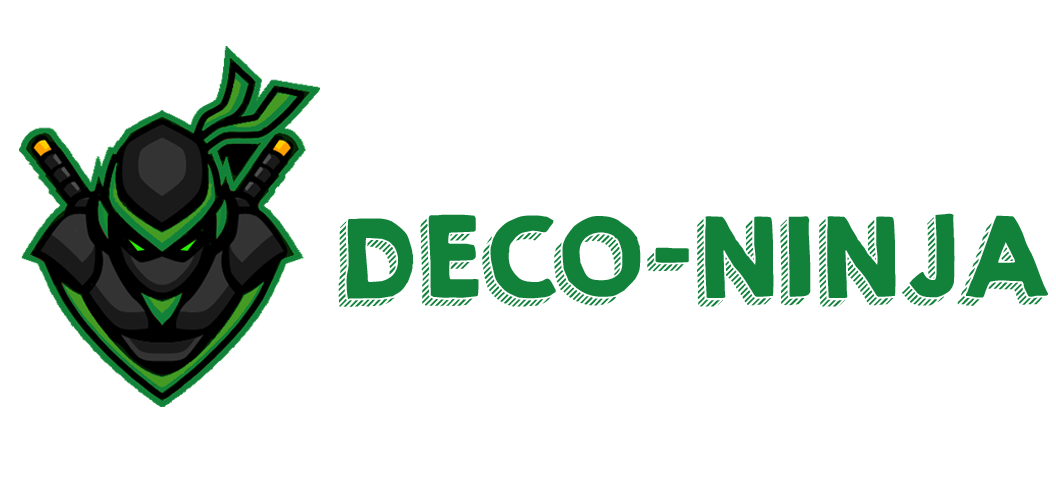
<style>
.page{position:relative;width:1056px;height:480px;background:#ffffff}
.page>*{position:absolute;margin:0}
.t1{font:99.3px "KGHAPPY";color:#12823b}
</style>
<div class="page">
<p class="t1" style="left:338px;top:213px;width:710px;height:94px">DECO-NINJA</p>
</div>
